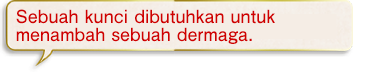
<style>
.page{position:relative;width:381px;height:72px;background:#ffffff}
.page>*{position:absolute;margin:0}
.t1{font:18px/18px "FutoGoB101Pr5-Bold";color:#d00000}
</style>
<div class="page">
<p class="t1" style="left:16px;top:9px;width:259px;height:35px">Sebuah kunci dibutuhkan untuk<br>menambah sebuah dermaga.</p>
</div>
